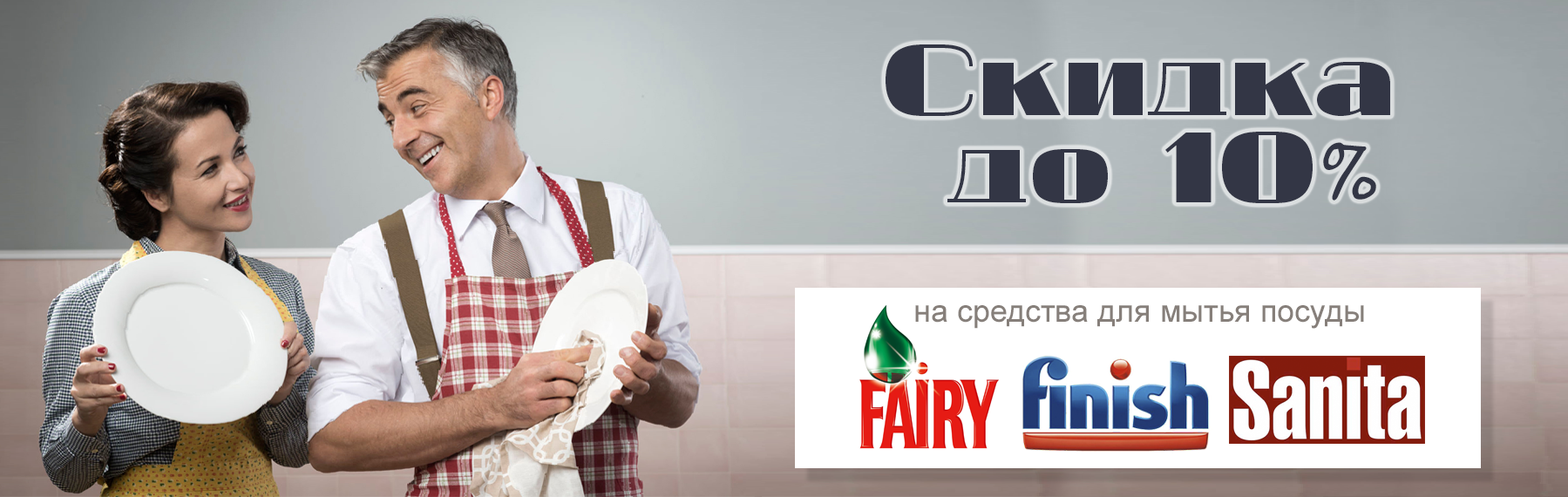
<style>
.page{position:relative;width:1568px;height:497px}
.page>*{position:absolute;margin:0}
.t1{font:87.2px/74.1px "20db";color:#333645}
.t2{font:87.2px/74.1px "SegoePrint";color:#333645}
.t3{font:31.4px "ArialMT";color:#867f7a}
</style>
<div class="page">
<p class="t1" style="left:886px;top:44px;width:504px;height:159px;text-align:center">Скидка <br>до 10<span class="t2">%</span></p>
<p class="t3" style="left:915px;top:305px;width:449px;height:24px">на средства для мытья посуды</p>
</div>
